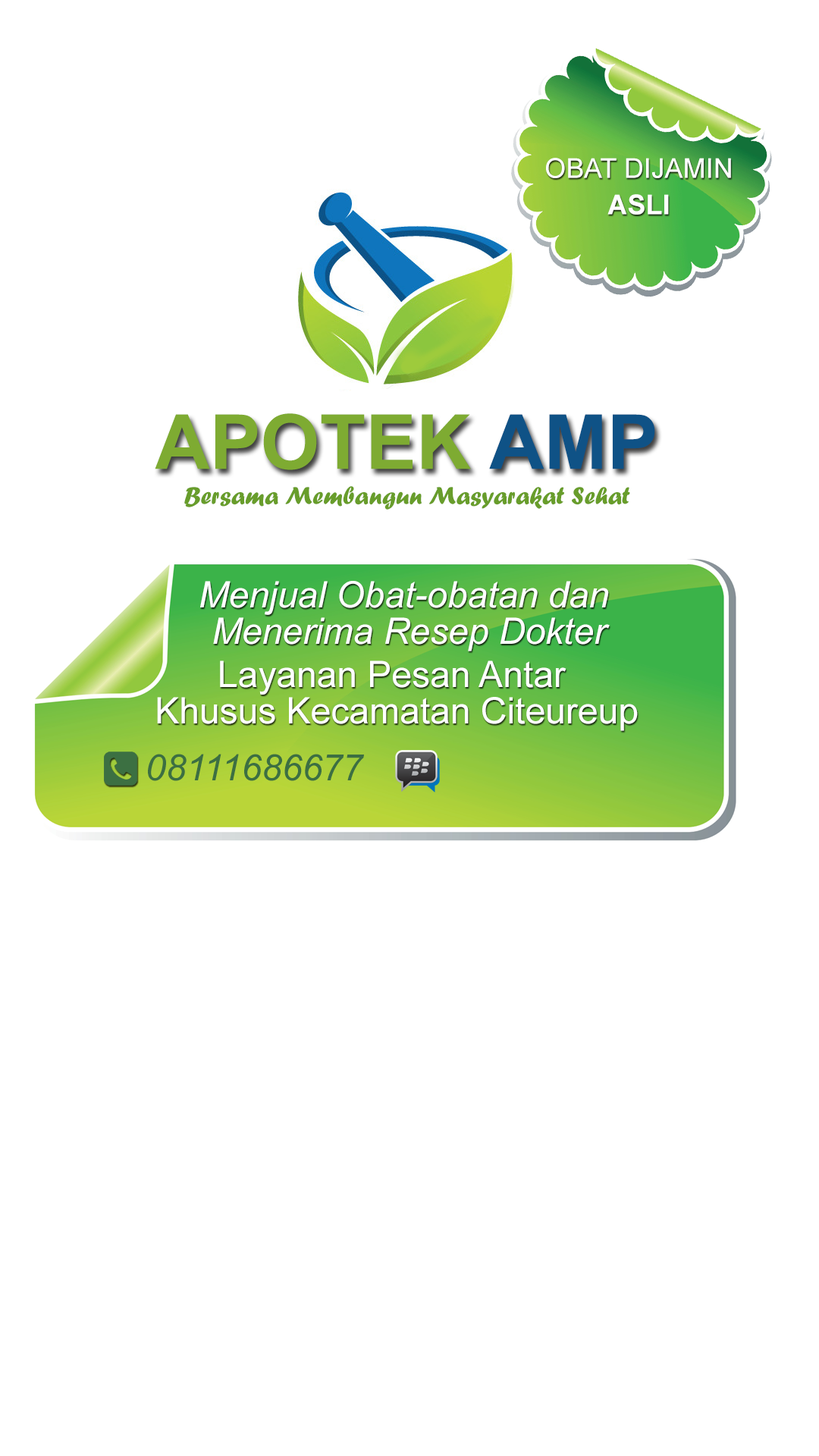
<style>
.page{position:relative;width:819px;height:1456px;background:#ffffff}
.page>*{position:absolute;margin:0}
.t1{font:27.3px/36.4px "ArialMT";color:#ffffff}
.t2{font:27.3px/36.4px "Arial-BoldMT";color:#ffffff}
.t3{font:75.8px "Arial-BoldMT";color:#7eab32}
.t4{font:75.8px "Arial-BoldMT";color:#0f5286}
.t5{font:25.3px "ForteMT";color:#689d2b}
.t6{font:36.4px/36.4px "Arial-ItalicMT";color:#ffffff}
.t7{font:36.4px/36.4px "ArialMT";color:#ffffff}
.t8{font:36.4px "Arial-ItalicMT";color:#3c6f42}
</style>
<div class="page">
<p class="t1" style="left:546px;top:158px;width:185px;height:57px;text-align:center">OBAT DIJAMIN<br><span class="t2">ASLI</span></p>
<p class="t3" style="left:155px;top:413px;width:500px;height:57px">APOTEK <span class="t4">AMP</span></p>
<p class="t5" style="left:184px;top:486px;width:446px;height:24px">Bersama Membangun Masyarakat Sehat</p>
<p class="t6" style="left:200px;top:581px;width:410px;height:70px;text-align:center">Menjual Obat-obatan dan <br>Menerima Resep Dokter</p>
<p class="t7" style="left:157px;top:660px;width:481px;height:71px;text-align:center">Layanan Pesan Antar <br>Khusus Kecamatan Citeureup</p>
<p class="t8" style="left:148px;top:754px;width:216px;height:27px">08111686677</p>
</div>
